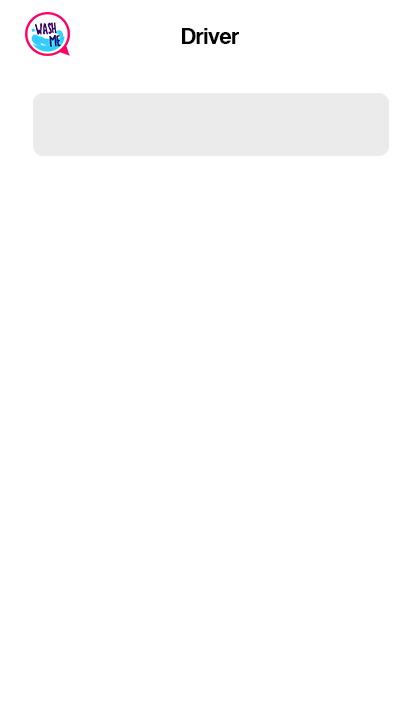
<style>
.page{position:relative;width:420px;height:720px;background:#ffffff}
.page>*{position:absolute;margin:0}
.t1{font:24px "CoolveticaRg-Regular";color:#040404}
</style>
<div class="page">
<p class="t1" style="left:182px;top:28px;width:57px;height:16px">Driver</p>
</div>
